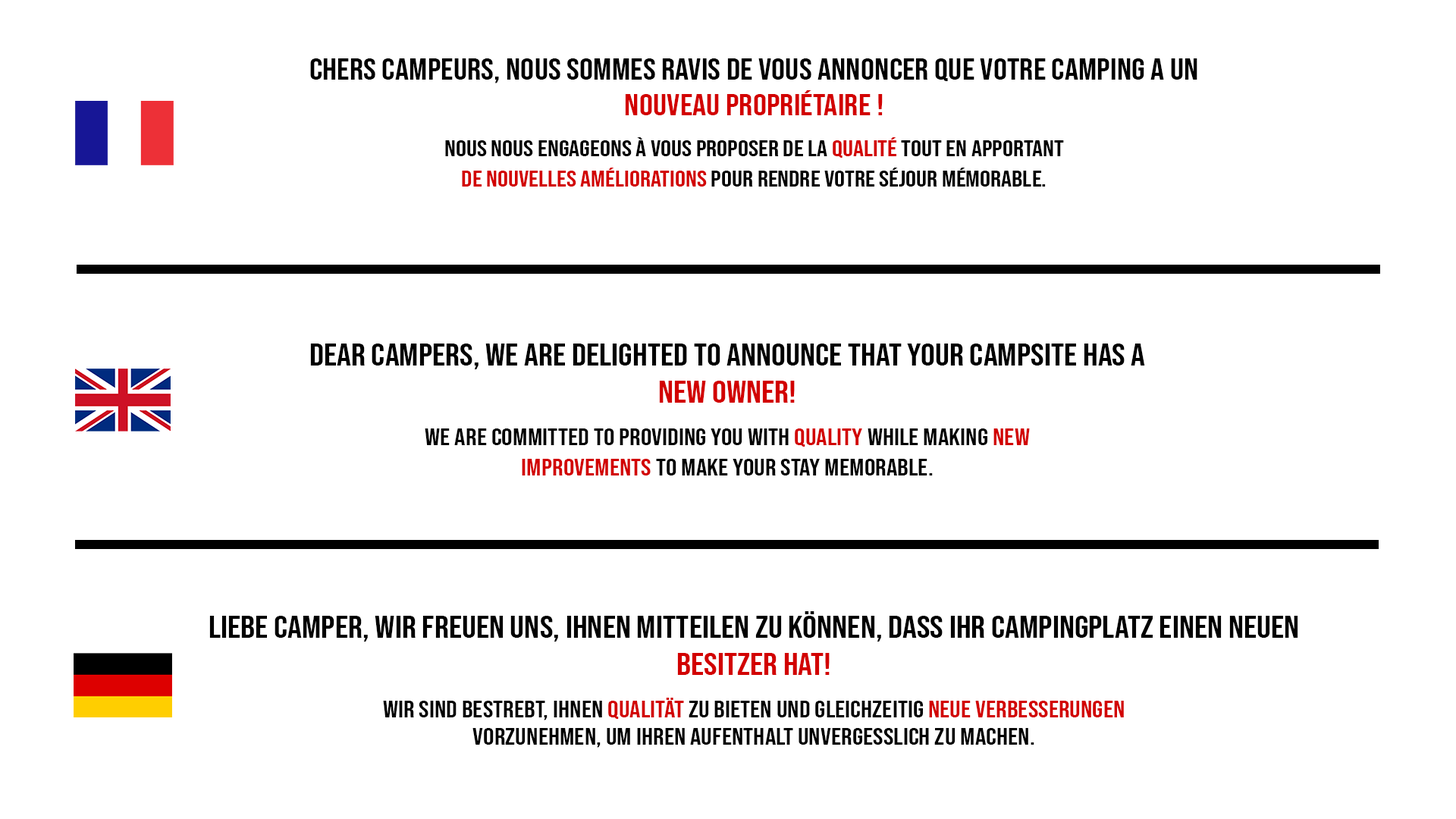
<style>
.page{position:relative;width:1456px;height:819px;background:#ffffff}
.page>*{position:absolute;margin:0}
.t1{font:29.8px "BebasNeue-Regular";color:#000000;scale:1.16 1}
.t2{font:29.8px "BebasNeue-Regular";color:#d20000;scale:1.16 1}
.t3{font:22.9px/41.2px "BebasNeue-Regular";color:#000000;scale:1.16 1}
.t4{font:22.9px/41.2px "BebasNeue-Regular";color:#d20000;scale:1.16 1}
.t5{font:22.9px/30.3px "BebasNeue-Regular";color:#d20000;scale:1.16 1}
.t6{font:22.9px/30.3px "BebasNeue-Regular";color:#000000;scale:1.16 1}
.t7{font:30.9px "BebasNeue-Regular";color:#000000;scale:1.16 1}
.t8{font:30.9px "BebasNeue-Regular";color:#d20000;scale:1.16 1}
.t9{font:23.7px/42.7px "BebasNeue-Regular";color:#000000;scale:1.16 1}
.t10{font:23.7px/42.7px "BebasNeue-Regular";color:#d20000;scale:1.16 1}
.t11{font:23.7px/30px "BebasNeue-Regular";color:#d20000;scale:1.16 1}
.t12{font:23.7px/30px "BebasNeue-Regular";color:#000000;scale:1.16 1}
.t13{font:23.7px/27.3px "BebasNeue-Regular";color:#000000;scale:1.16 1}
</style>
<div class="page">
<p class="t1" style="left:310px;top:58px;width:887px;height:129px;text-align:center">Chers campeurs, nous sommes ravis de vous annoncer que votre camping a un<br><span class="t2">nouveau propriétaire !<br></span><span class="t3">Nous nous engageons à vous proposer de la </span><span class="t4">qualité</span><span class="t3"> tout en apportant<br></span><span class="t5">de nouvelles améliorations</span><span class="t6"> pour rendre votre séjour mémorable.</span></p>
<p class="t7" style="left:310px;top:344px;width:835px;height:131px;text-align:center">Dear campers, we are delighted to announce that your campsite has a<br><span class="t8">new owner!<br></span><span class="t9">We are committed to providing you with </span><span class="t10">quality</span><span class="t9"> while making </span><span class="t10">new<br></span><span class="t11">improvements</span><span class="t12"> to make your stay memorable.</span></p>
<p class="t7" style="left:209px;top:611px;width:1089px;height:137px;text-align:center">Liebe Camper, wir freuen uns, Ihnen mitteilen zu können, dass Ihr Campingplatz einen neuen<br><span class="t8">Besitzer hat!<br></span><span class="t9">Wir sind bestrebt, Ihnen </span><span class="t10">Qualität</span><span class="t9"> zu bieten und gleichzeitig </span><span class="t10">neue Verbesserungen<br></span><span class="t13">vorzunehmen, um Ihren Aufenthalt unvergesslich zu machen.</span></p>
</div>
